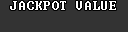
<style>
.page{position:relative;width:128px;height:32px;background:#333333}
.page>*{position:absolute;margin:0}
.t1{font:12px "Terminal";letter-spacing:0.075em;color:#ffffff}
</style>
<div class="page">
<p class="t1" style="left:10px;top:1px;width:106px;height:9px">JACKPOT VALUE</p>
</div>
